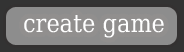
<style>
.page{position:relative;width:184px;height:52px;background:#8d8d8d}
.page>*{position:absolute;margin:0}
.t1{font:25px "DejaVuSerifCondensed";color:#ffffff}
</style>
<div class="page">
<p class="t1" style="left:24px;top:15px;width:140px;height:23px">create game</p>
</div>
